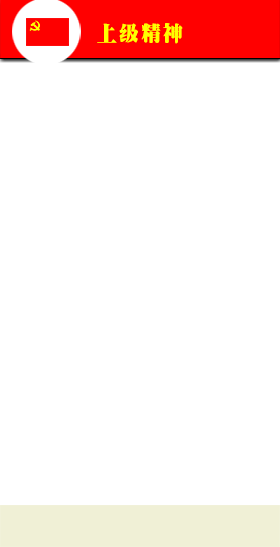
<style>
.page{position:relative;width:280px;height:547px;background:#ffffff}
.page>*{position:absolute;margin:0}
.t1{font:22.2px "RS_CuBiao";letter-spacing:0.05em;color:#ffff00;scale:0.94 1}
</style>
<div class="page">
<p class="t1" style="left:97px;top:23px;width:86px;height:21px">上级精神</p>
</div>
